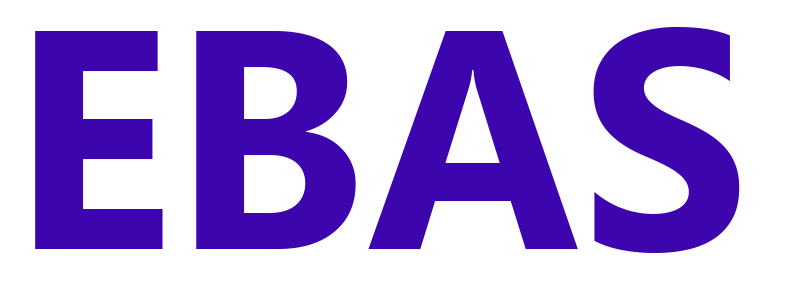
<style>
.page{position:relative;width:800px;height:284px;background:#ffffff}
.page>*{position:absolute;margin:0}
.t1{font:310.8px "SegoeUI-Bold";color:#3d05ad}
</style>
<div class="page">
<p class="t1" style="left:35px;top:27px;width:705px;height:226px">EBAS</p>
</div>
